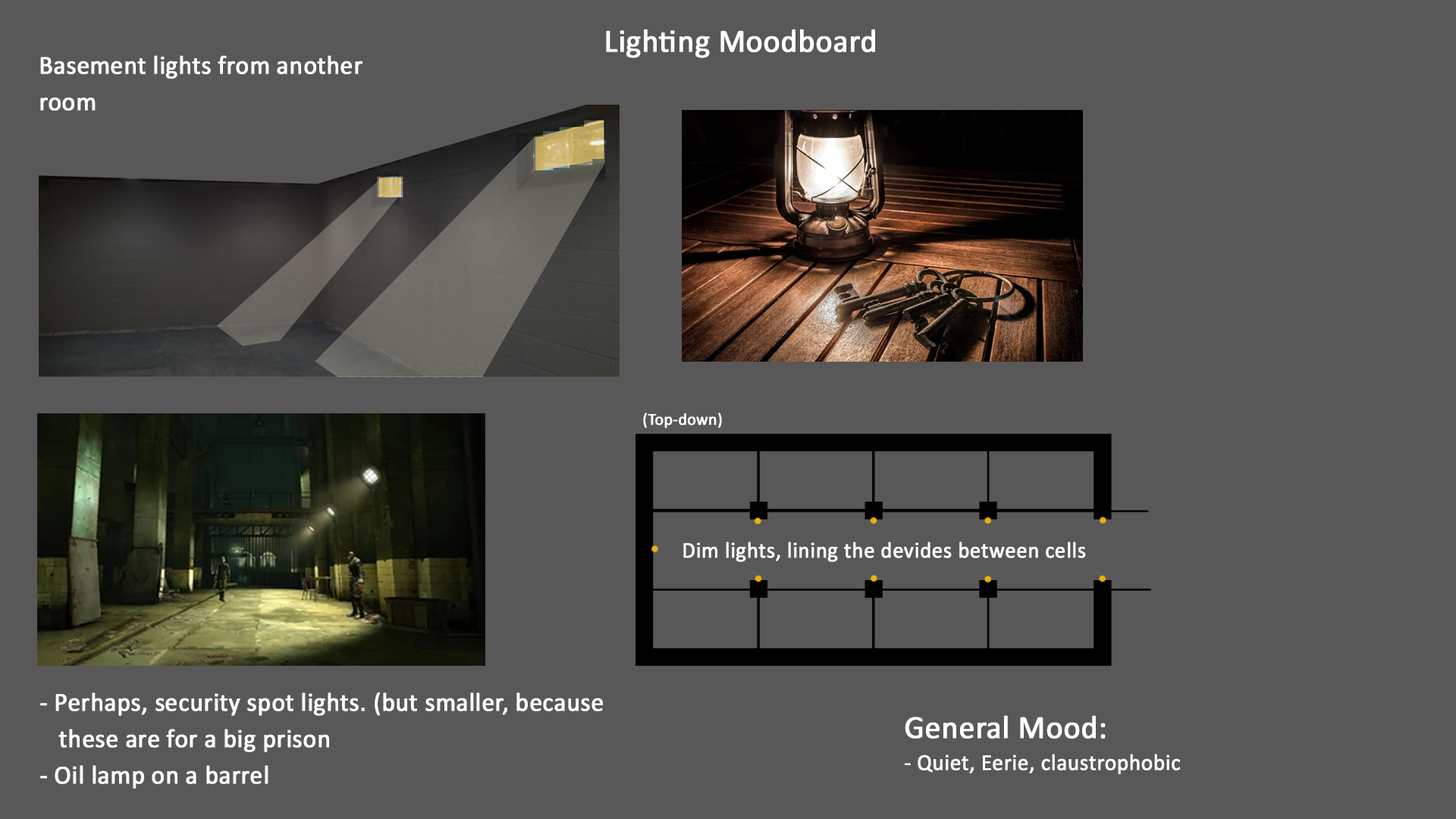
<style>
.page{position:relative;width:1456px;height:819px;background:#585858}
.page>*{position:absolute;margin:0}
.t1{font:32.6px "Calibri";color:#ffffff;font-weight:bold;scale:0.97 1}
.t2{font:26.1px "Calibri";color:#ffffff;font-weight:bold;scale:0.97 1}
.t3{font:16.9px "Calibri";color:#ffffff;font-weight:bold;scale:0.96 1}
.t4{font:22.5px "Calibri";color:#ffffff;font-weight:bold;scale:0.96 1}
.t5{font:22.8px "Calibri";color:#ffffff;font-weight:bold;scale:0.97 1}
</style>
<div class="page">
<p class="t1" style="left:606px;top:29px;width:269px;height:29px">Lighting Moodboard</p>
<p class="t2" style="left:40px;top:55px;width:322px;height:56px">Basement lights from another room</p>
<p class="t3" style="left:643px;top:413px;width:79px;height:15px">(Top-down)</p>
<p class="t4" style="left:683px;top:541px;width:403px;height:21px">Dim lights, lining the devides between cells</p>
<p class="t2" style="left:40px;top:692px;width:563px;height:97px">- Perhaps, security spot lights. (but smaller, because <br>   these are for a big prison<br>- Oil lamp on a barrel</p>
<p class="t5" style="left:905px;top:715px;width:275px;height:59px"><span class="t1">General Mood:<br></span>- Quiet, Eerie, claustrophobic</p>
</div>
